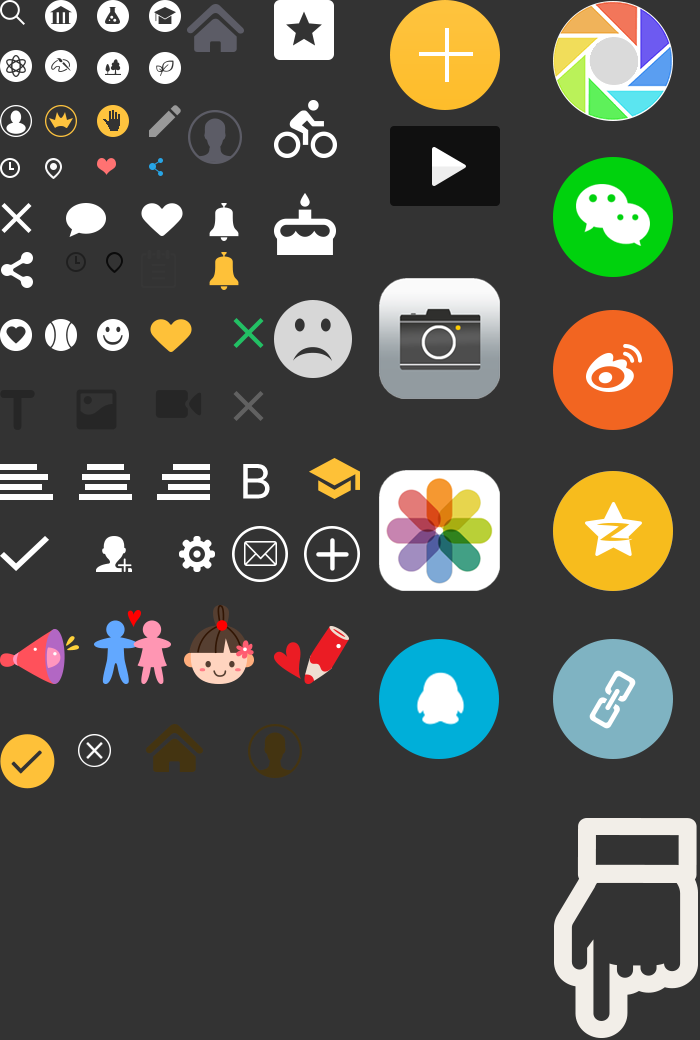
<style>
.page{position:relative;width:700px;height:1040px;background:#333333}
.page>*{position:absolute;margin:0}
.t1{font:48px "ArialMT";color:#ffffff}
</style>
<div class="page">
<p class="t1" style="left:243px;top:464px;width:27px;height:35px">B</p>
</div>
